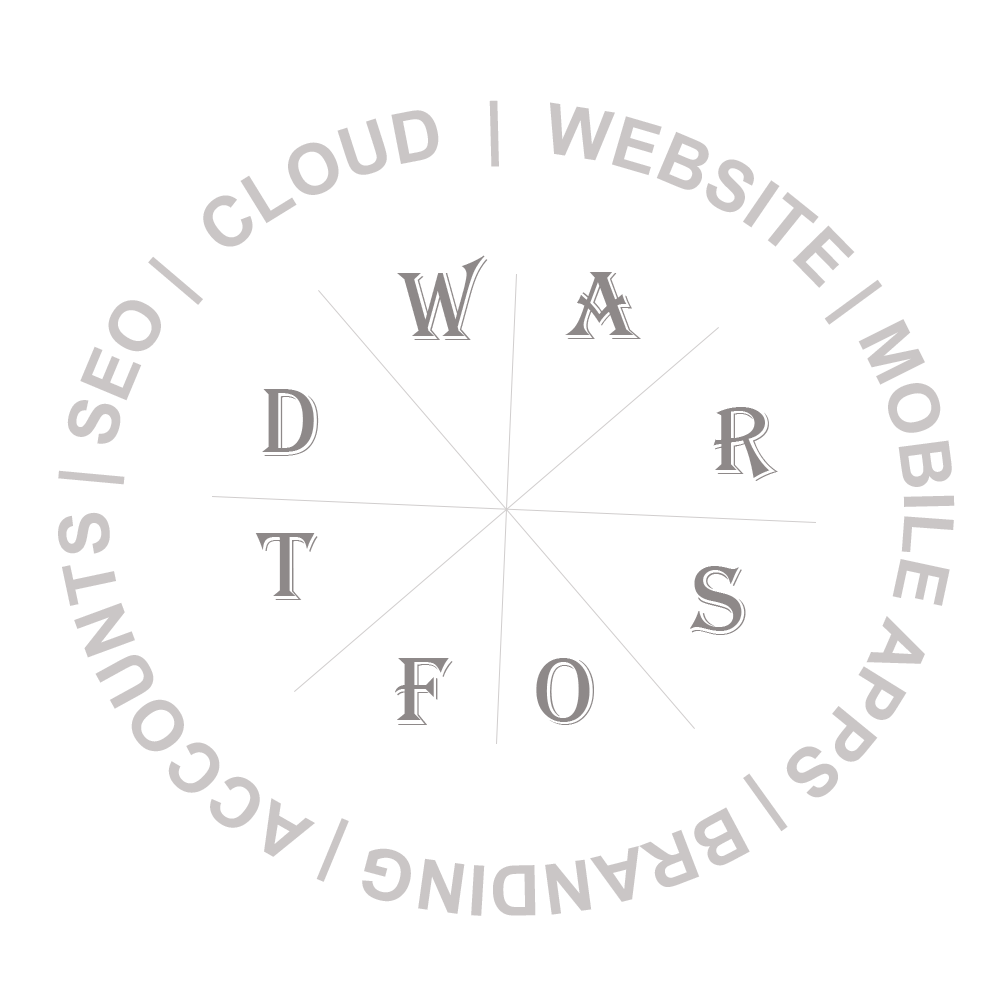
<style>
.page{position:relative;width:1000px;height:1000px;background:#ffffff}
.page>*{position:absolute;margin:0}
.t1{font:70px "Arial-BoldMT";color:#cac6c6}
.t2{font:100px "Algerian";color:#8e8989}
</style>
<div class="page">
<p class="t1" style="left:58px;top:100px;width:897px;height:816px">WEBSITE | MOBILE APPS | BRANDING | ACCOUNTS | SEO |  CLOUD  |<br> a</p>
<p class="t2" style="left:397px;top:255px;width:91px;height:85px">W</p>
<p class="t2" style="left:565px;top:272px;width:76px;height:67px">A</p>
<p class="t2" style="left:262px;top:389px;width:57px;height:67px">D</p>
<p class="t2" style="left:713px;top:407px;width:65px;height:74px">R</p>
<p class="t2" style="left:255px;top:533px;width:63px;height:67px">T</p>
<p class="t2" style="left:690px;top:566px;width:56px;height:69px">S</p>
<p class="t2" style="left:395px;top:658px;width:58px;height:67px">F</p>
<p class="t2" style="left:536px;top:658px;width:58px;height:67px">O</p>
</div>
